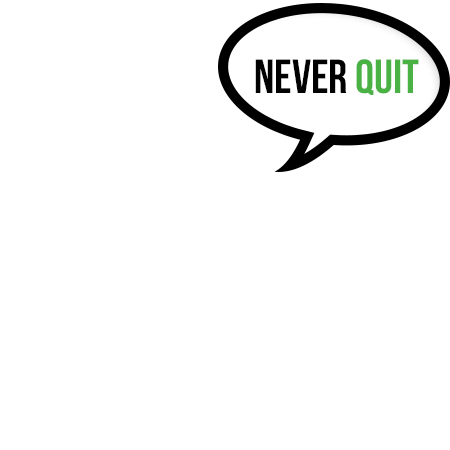
<style>
.page{position:relative;width:450px;height:450px;background:#ffffff}
.page>*{position:absolute;margin:0}
.t1{font:47.7px "BebasNeue";color:#010101}
.t2{font:47.7px "BebasNeue";color:#4ab144}
</style>
<div class="page">
<p class="t1" style="left:255px;top:59px;width:164px;height:36px">NEVER <span class="t2">QUIT</span></p>
</div>
